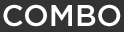
<style>
.page{position:relative;width:124px;height:32px;background:#333333}
.page>*{position:absolute;margin:0}
.t1{font:30px "Gotham-Medium";color:#ffffff}
</style>
<div class="page">
<p class="t1" style="left:3px;top:4px;width:118px;height:23px">COMBO</p>
</div>
